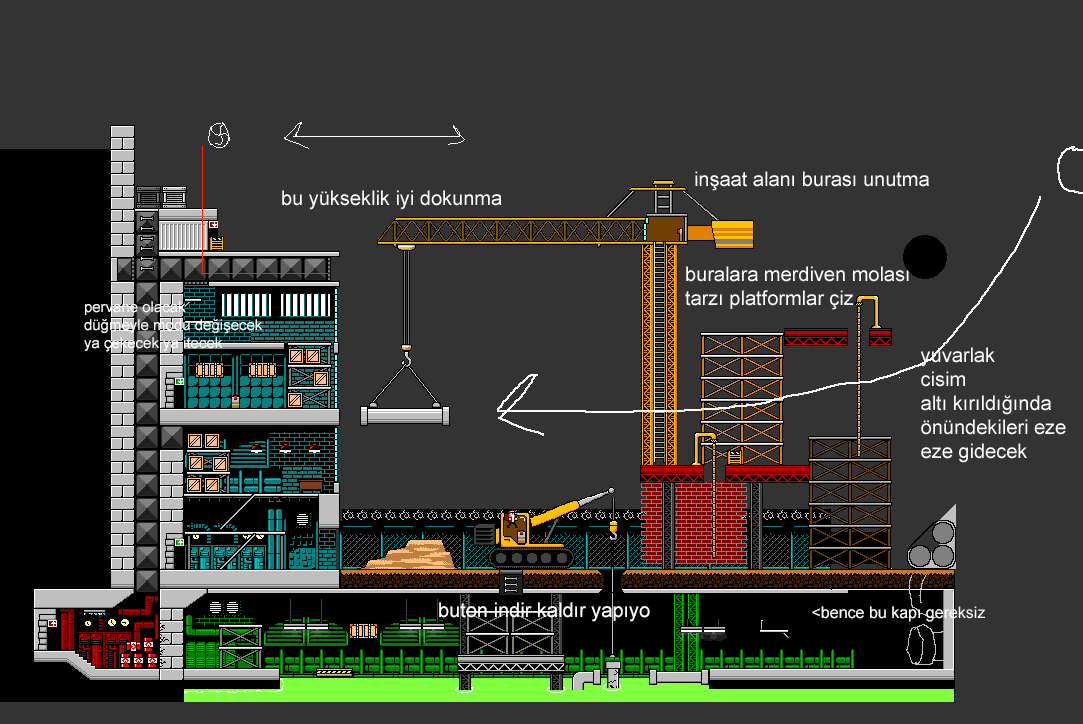
<style>
.page{position:relative;width:1083px;height:724px;background:#333333}
.page>*{position:absolute;margin:0}
.t1{font:20px "ArialMT";color:#ffffff}
.t2{font:15px "ArialMT";color:#ffffff}
.t3{font:16px "ArialMT";color:#ffffff}
</style>
<div class="page">
<p class="t1" style="left:695px;top:171px;width:234px;height:20px">inşaat alanı burası unutma</p>
<p class="t1" style="left:282px;top:190px;width:220px;height:20px">bu yükseklik iyi dokunma</p>
<p class="t1" style="left:685px;top:266px;width:224px;height:44px;text-align:justify">buralara merdiven molası<br>tarzı platformlar çiz</p>
<p class="t2" style="left:84px;top:301px;width:179px;height:51px;text-align:justify">pervane olacak<br>düğmeyle modu değişecek<br>ya çekecek ya itecek</p>
<p class="t1" style="left:920px;top:347px;width:146px;height:116px;text-align:justify">yuvarlak<br>cisim<br>altı kırıldığında<br>önündekileri eze<br>eze gidecek</p>
<p class="t1" style="left:439px;top:602px;width:211px;height:20px">buton indir kaldır yapıyo</p>
<p class="t3" style="left:812px;top:606px;width:173px;height:16px">&lt;bence bu kapı gereksiz</p>
</div>
